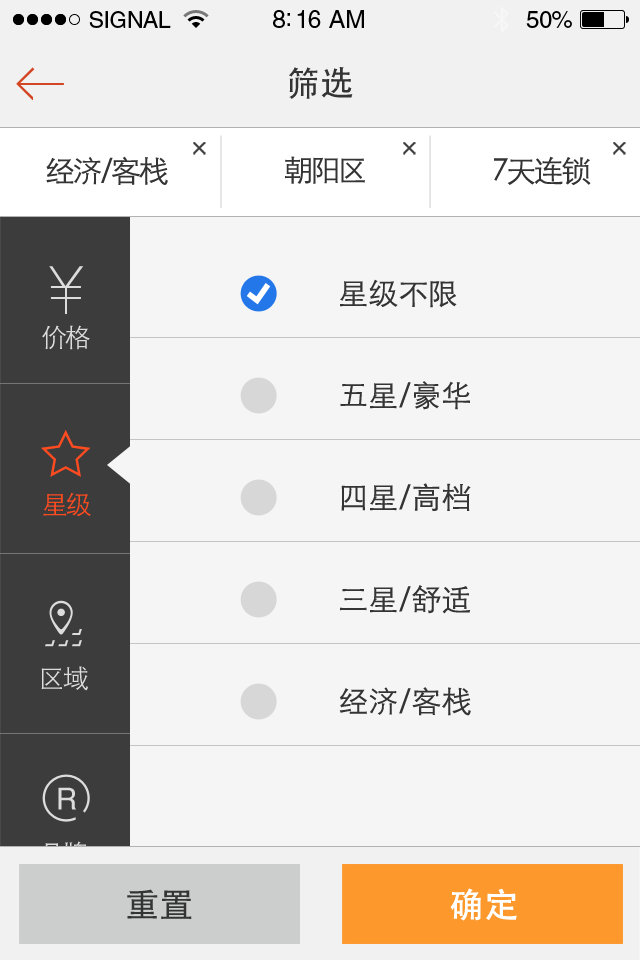
<style>
.page{position:relative;width:640px;height:960px;background:#f5f5f5}
.page>*{position:absolute;margin:0}
.t1{font:34px "STHeitiSC-Medium";color:#343434}
.t2{font:30px "STHeitiSC-Light";letter-spacing:-0.08em;color:#343434}
.t3{font:30px "STHeitiSC-Light";color:#343434}
.t4{font:26px "STHeitiSC-Light";letter-spacing:-0.08em;color:#dcdcdc}
.t5{font:26px "STHeitiSC-Light";letter-spacing:-0.08em;color:#fe4b20}
.t6{font:30px "Helvetica";letter-spacing:-0.08em;color:#dcdcdc}
.t7{font:34px "AdobeHeitiStd-Regular";color:#343434}
.t8{font:34px "AdobeHeitiStd-Regular";color:#ffffff;font-weight:bold}
</style>
<div class="page">
<p class="t1" style="left:289px;top:67px;width:64px;height:32px">筛选</p>
<p class="t2" style="left:46px;top:156px;width:122px;height:29px">经济/客栈</p>
<p class="t2" style="left:285px;top:156px;width:80px;height:28px">朝阳区</p>
<p class="t2" style="left:494px;top:156px;width:97px;height:29px">7天连锁</p>
<p class="t3" style="left:340px;top:279px;width:117px;height:29px">星级不限</p>
<p class="t4" style="left:42px;top:325px;width:48px;height:25px">价格</p>
<p class="t3" style="left:340px;top:381px;width:130px;height:29px">五星/豪华</p>
<p class="t3" style="left:341px;top:483px;width:130px;height:29px">四星/高档</p>
<p class="t5" style="left:43px;top:492px;width:48px;height:25px">星级</p>
<p class="t3" style="left:340px;top:585px;width:131px;height:29px">三星/舒适</p>
<p class="t4" style="left:41px;top:666px;width:47px;height:25px">区域</p>
<p class="t3" style="left:339px;top:687px;width:132px;height:29px">经济/客栈</p>
<p class="t6" style="left:58px;top:787px;width:18px;height:23px">R</p>
<p class="t7" style="left:127px;top:889px;width:65px;height:30px">重置</p>
<p class="t8" style="left:450px;top:888px;width:67px;height:33px">确定</p>
</div>
